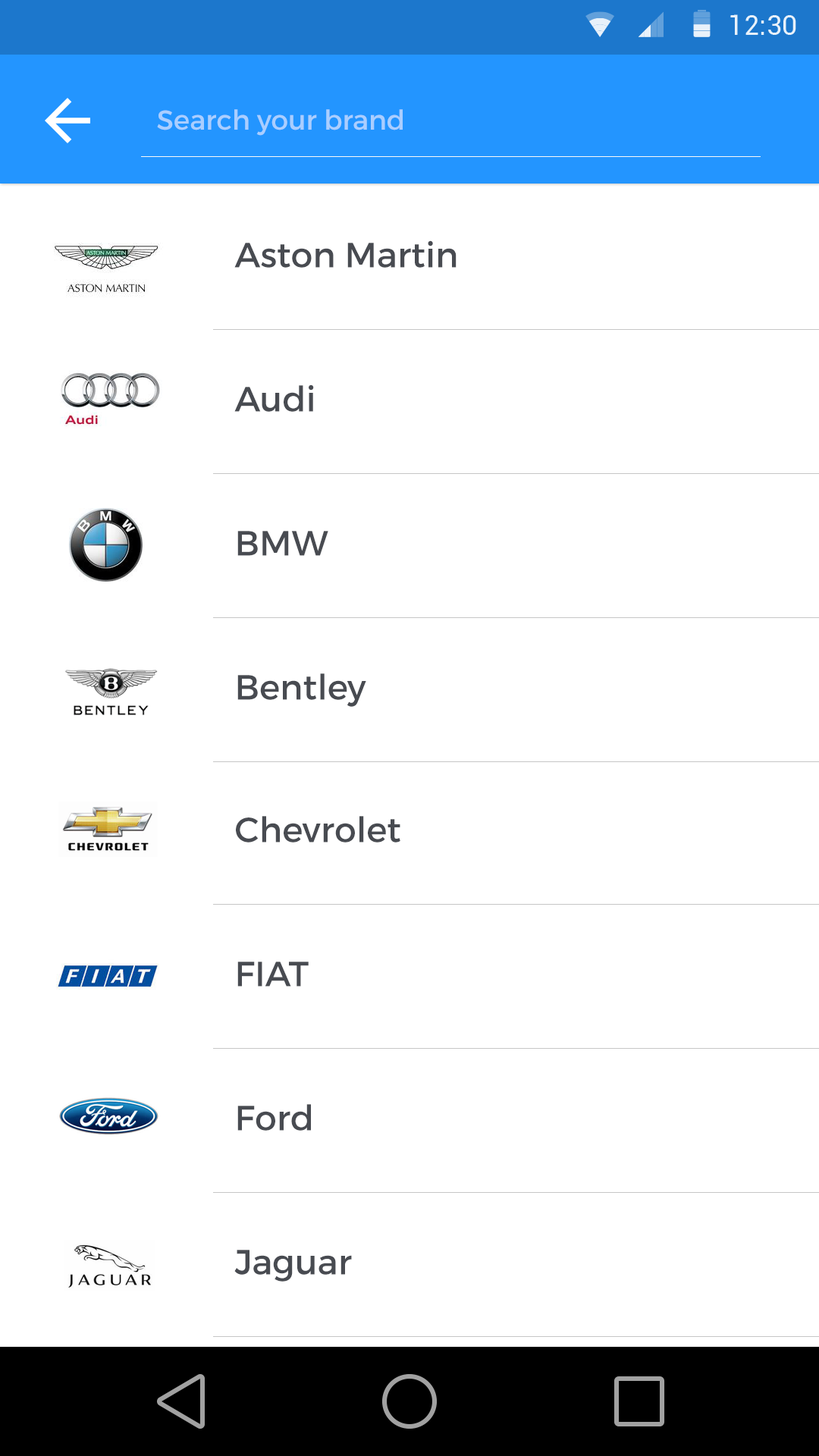
<style>
.page{position:relative;width:819px;height:1456px;background:#ffffff}
.page>*{position:absolute;margin:0}
.t1{font:27.3px "Montserrat-Regular";color:#aaceff}
.t2{font:34.9px "Montserrat-Regular";color:#484b51}
</style>
<div class="page">
<p class="t1" style="left:157px;top:109px;width:246px;height:27px">Search your brand</p>
<p class="t2" style="left:234px;top:240px;width:223px;height:28px">Aston Martin</p>
<p class="t2" style="left:234px;top:384px;width:80px;height:28px">Audi</p>
<p class="t2" style="left:237px;top:531px;width:91px;height:25px">BMW</p>
<p class="t2" style="left:237px;top:673px;width:129px;height:34px">Bentley</p>
<p class="t2" style="left:236px;top:816px;width:164px;height:26px">Chevrolet</p>
<p class="t2" style="left:237px;top:962px;width:72px;height:25px">FIAT</p>
<p class="t2" style="left:237px;top:1104px;width:74px;height:27px">Ford</p>
<p class="t2" style="left:234px;top:1250px;width:118px;height:32px">Jaguar</p>
</div>
